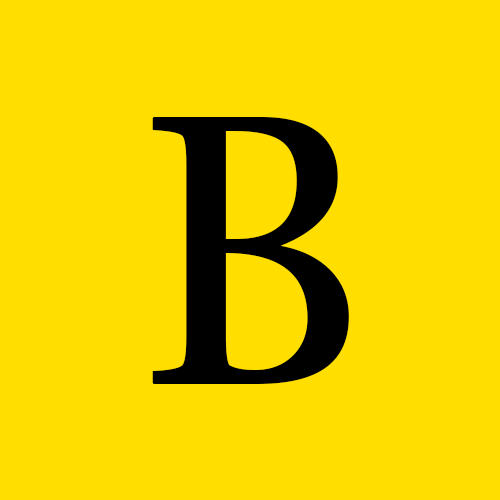
<style>
.page{position:relative;width:500px;height:500px;background:#ffde00}
.page>*{position:absolute;margin:0}
.t1{font:367.4px "LucidaBright";color:#000000;font-weight:bold}
</style>
<div class="page">
<p class="t1" style="left:152px;top:117px;width:197px;height:267px">B</p>
</div>
